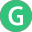
<style>
.page{position:relative;width:32px;height:32px;background:#31c27c}
.page>*{position:absolute;margin:0}
.t1{font:24px "AdobeHeitiStd-Regular";color:#feffff}
</style>
<div class="page">
<p class="t1" style="left:8px;top:6px;width:15px;height:20px">G</p>
</div>
